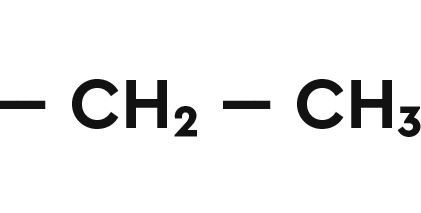
<style>
.page{position:relative;width:421px;height:213px;background:#ffffff}
.page>*{position:absolute;margin:0}
.t1{font:72px "CeraPro-Bold";color:#121212}
</style>
<div class="page">
<p class="t1" style="left:0px;top:79px;width:421px;height:58px">--- CH₂ --- CH₃</p>
</div>
